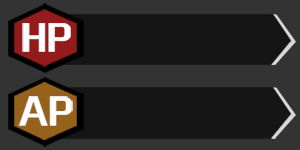
<style>
.page{position:relative;width:300px;height:150px;background:#151515}
.page>*{position:absolute;margin:0}
.t1{font:31.2px "KoreanYNMYT-B";color:#ffffff;scale:1.22 1}
</style>
<div class="page">
<p class="t1" style="left:22px;top:23px;width:49px;height:29px">HP</p>
<p class="t1" style="left:18px;top:96px;width:55px;height:30px">AP</p>
</div>
